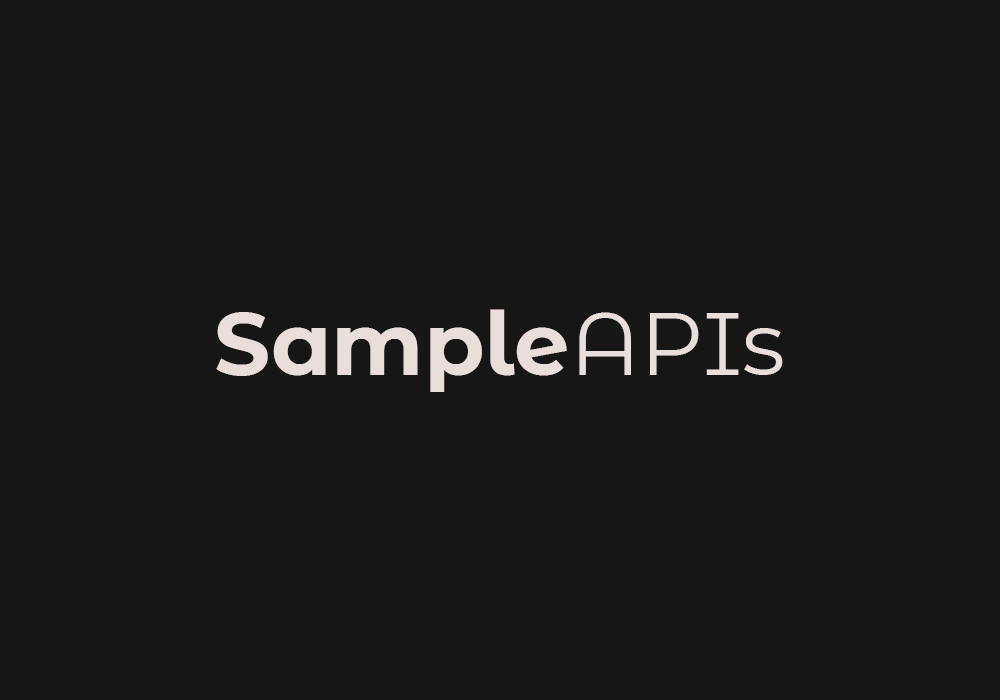
<style>
.page{position:relative;width:1000px;height:700px;background:#161616}
.page>*{position:absolute;margin:0}
.t1{font:88px "MontserratAlternates-Bold";color:#eadeda}
.t2{font:88px "MontserratAlternates-Regular";color:#eadeda}
</style>
<div class="page">
<p class="t1" style="left:216px;top:309px;width:567px;height:83px">Sample<span class="t2">APIs</span></p>
</div>
